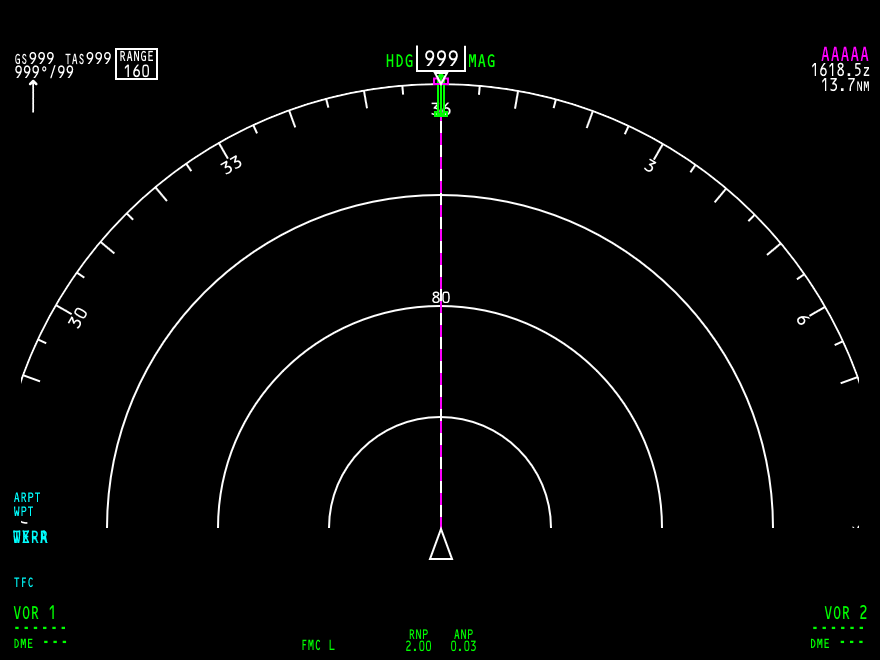
<style>
.page{position:relative;width:880px;height:660px;background:#000000}
.page>*{position:absolute;margin:0}
.t1{font:17.3px "OCRB";color:#ffffff;scale:0.84 1}
.t2{font:20px "OCRB";color:#00ff00;scale:0.79 1}
.t3{font:22.5px "OCRB";color:#ffffff;scale:0.87 1}
.t4{font:19.8px "OCRB";color:#00ff00;scale:0.79 1}
.t5{font:22.2px "OCRB";color:#ff00ff;scale:0.74 1}
.t6{font:18.2px "OCRB";color:#ffffff;scale:0.78 1}
.t7{font:18px "OCRB";color:#ffffff;scale:0.83 1}
.t8{font:19px "OCRB";color:#ffffff;scale:0.75 1}
.t9{font:19px "OCRB";color:#ffffff;scale:0.77 1}
.t10{font:16.5px "OCRB";color:#ffffff}
.t11{font:14.8px "OCRB";color:#00ffff;scale:0.77 1}
.t12{font:19.3px "OCRB";color:#00ffff;scale:0.77 1}
.t13{font:14.8px "OCRB";color:#00f6f6;scale:0.77 1}
.t14{font:21px "OCRB";color:#00ff00;scale:0.73 1}
.t15{font:16px "OCRB";color:#00ff00;scale:0.72 1}
.t16{font:15px "OCRB";color:#00ff00;scale:0.74 1}
</style>
<div class="page">
<p class="t1" style="left:29px;top:52px;width:25px;height:12px">999</p>
<p class="t1" style="left:86px;top:52px;width:25px;height:12px">999</p>
<p class="t2" style="left:386px;top:54px;width:27px;height:14px">HDG</p>
<p class="t3" style="left:425px;top:50px;width:33px;height:16px">999</p>
<p class="t4" style="left:468px;top:54px;width:27px;height:14px">MAG</p>
<p class="t5" style="left:821px;top:46px;width:48px;height:15px">AAAAA</p>
<p class="t6" style="left:15px;top:65px;width:59px;height:14px">999°/99</p>
<p class="t7" style="left:124px;top:64px;width:26px;height:14px">160</p>
<p class="t8" style="left:812px;top:62px;width:58px;height:15px">1618.5z</p>
<p class="t9" style="left:822px;top:78px;width:33px;height:14px">13.7</p>
<p class="t10" style="left:432px;top:291px;width:18px;height:13px">80</p>
<p class="t11" style="left:14px;top:492px;width:26px;height:10px">ARPT</p>
<p class="t11" style="left:14px;top:506px;width:20px;height:11px">WPT</p>
<p class="t12" style="left:13px;top:530px;width:35px;height:14px">WX-A</p>
<p class="t12" style="left:13px;top:530px;width:35px;height:14px">TERR</p>
<p class="t13" style="left:14px;top:577px;width:19px;height:11px">TFC</p>
<p class="t14" style="left:15px;top:626px;width:50px;height:4px">------</p>
<p class="t14" style="left:813px;top:626px;width:50px;height:4px">------</p>
<p class="t14" style="left:44px;top:640px;width:23px;height:4px">---</p>
<p class="t15" style="left:302px;top:639px;width:33px;height:12px">FMC L</p>
<p class="t16" style="left:406px;top:640px;width:25px;height:12px">2.00</p>
<p class="t16" style="left:451px;top:640px;width:25px;height:12px">0.03</p>
<p class="t14" style="left:840px;top:640px;width:23px;height:4px">---</p>
</div>
